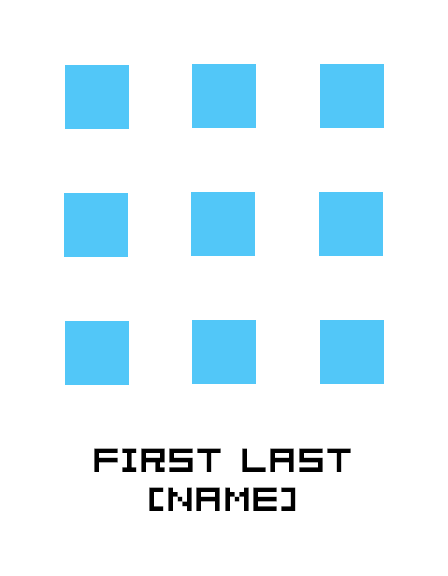
<style>
.page{position:relative;width:448px;height:576px;background:#ffffff}
.page>*{position:absolute;margin:0}
.t1{font:33px "Pixelation";color:#000000}
</style>
<div class="page">
<p class="t1" style="left:94px;top:448px;width:257px;height:63px;text-align:center">FIRST LAST<br>(name)</p>
</div>
